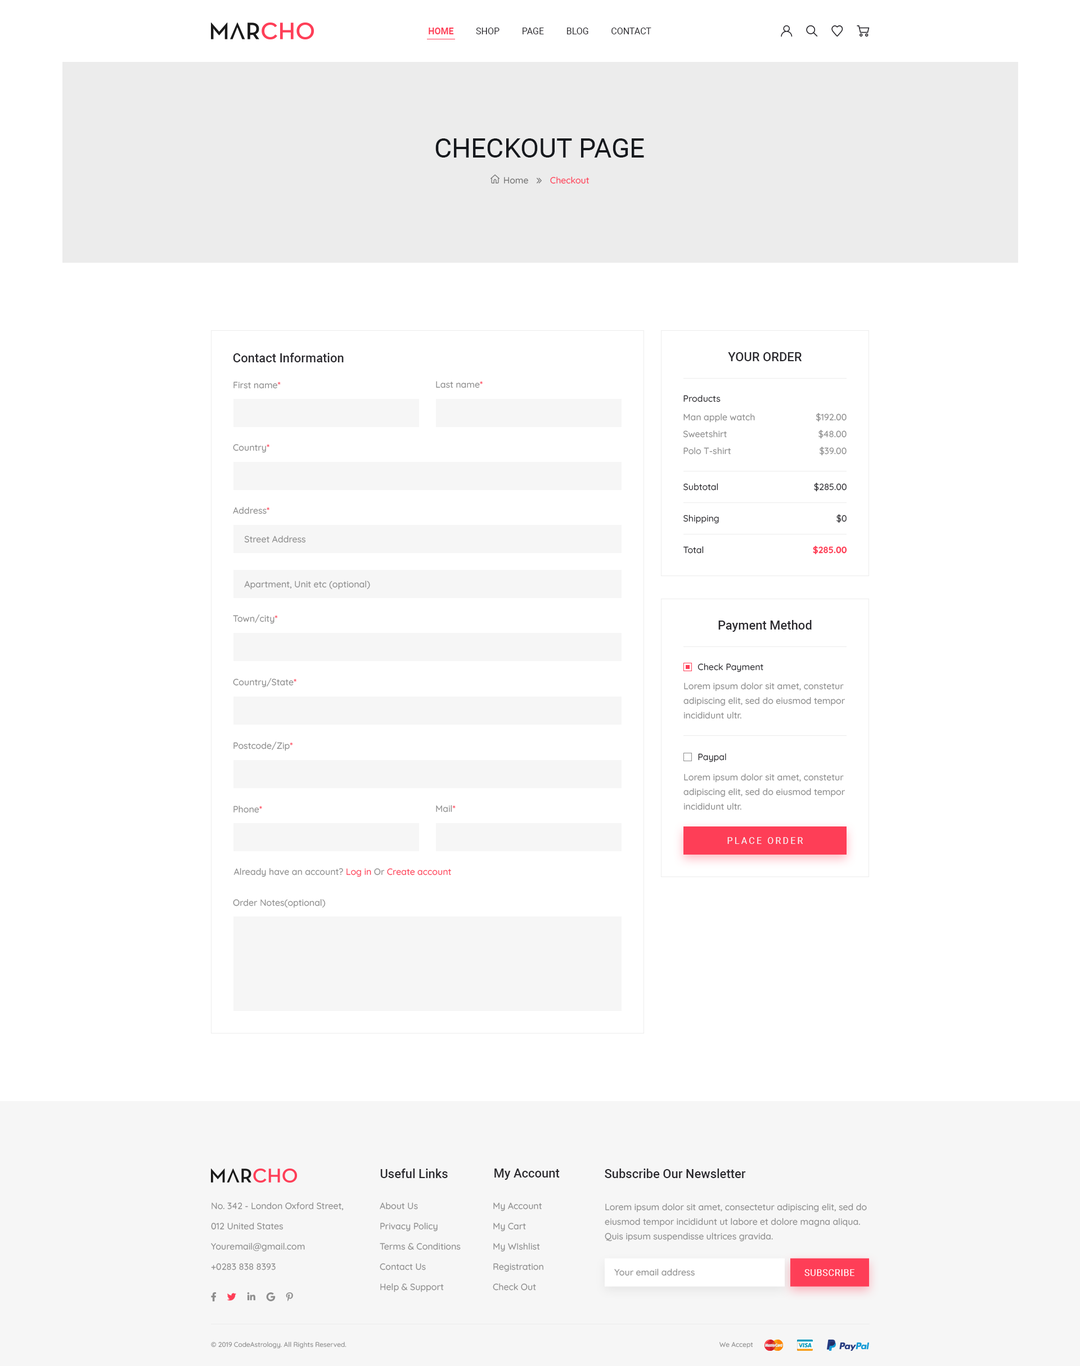
<style>
.page{position:relative;width:1080px;height:1366px;background:#ffffff}
.page>*{position:absolute;margin:0}
.t1{font:9px "Roboto-Regular";color:#29282d}
.t2{font:9px "Roboto-Bold";color:#fe3e57}
.t3{font:27px "Roboto-Regular";color:#15181d}
.t4{font:9px "Quicksand-Medium";color:#727272}
.t5{font:9px "Quicksand-Medium";color:#fe3e57}
.t6{font:12.4px "Roboto-Medium";color:#29282d}
.t7{font:12.4px "Roboto-Medium";color:#29282d;text-transform:uppercase}
.t8{font:9px "Quicksand-Medium";color:#8d8d8d}
.t9{font:9px "Quicksand-Medium";color:#29282d}
.t10{font:9px/16.9px "Quicksand-Medium";color:#8d8d8d}
.t11{font:9px "Quicksand-Bold";color:#fe3e57}
.t12{font:9px/14.6px "Quicksand-Medium";color:#8d8d8d}
.t13{font:9px "Roboto-Regular";letter-spacing:0.2em;color:#f5f6f8}
.t14{font:9px/20.2px "Quicksand-Medium";color:#8d8d8d}
.t15{font:9px "Roboto-Regular";letter-spacing:0.05em;color:#ffffff;text-transform:uppercase}
.t16{font:6.8px "Quicksand-Medium";color:#8d8d8d}
</style>
<div class="page">
<p class="t1" style="left:429px;top:28px;width:222px;height:6px"><span class="t2">HOME          </span>SHOP          PAGE          BLOG          CONTACT</p>
<p class="t3" style="left:435px;top:138px;width:209px;height:20px">CHECKOUT PAGE</p>
<p class="t4" style="left:504px;top:177px;width:24px;height:7px">Home</p>
<p class="t5" style="left:550px;top:177px;width:40px;height:7px">Checkout</p>
<p class="t6" style="left:233px;top:353px;width:111px;height:9px">Contact Information</p>
<p class="t7" style="left:728px;top:352px;width:74px;height:9px">Your Order</p>
<p class="t8" style="left:233px;top:381px;width:48px;height:8px">First name<span class="t5">*</span></p>
<p class="t8" style="left:436px;top:381px;width:47px;height:7px">Last name<span class="t5">*</span></p>
<p class="t9" style="left:683px;top:395px;width:38px;height:7px">Products</p>
<p class="t10" style="left:683px;top:413px;width:72px;height:41px">Man apple watch<br>Sweetshirt<br>Polo T-shirt</p>
<p class="t10" style="left:816px;top:413px;width:31px;height:43px;text-align:right">$192.00<br>$48.00<br>$39.00</p>
<p class="t8" style="left:233px;top:444px;width:36px;height:9px">Country<span class="t5">*</span></p>
<p class="t9" style="left:683px;top:483px;width:35px;height:7px">Subtotal</p>
<p class="t9" style="left:814px;top:482px;width:33px;height:10px">$285.00</p>
<p class="t8" style="left:233px;top:507px;width:36px;height:7px">Address<span class="t5">*</span></p>
<p class="t9" style="left:683px;top:515px;width:36px;height:9px">Shipping</p>
<p class="t9" style="left:836px;top:514px;width:11px;height:9px">$0</p>
<p class="t8" style="left:244px;top:536px;width:62px;height:7px">Street Address</p>
<p class="t11" style="left:813px;top:546px;width:34px;height:9px">$285.00</p>
<p class="t9" style="left:683px;top:546px;width:21px;height:8px">Total</p>
<p class="t8" style="left:244px;top:580px;width:126px;height:10px">Apartment, Unit etc (optional)</p>
<p class="t8" style="left:233px;top:614px;width:45px;height:10px">Town/city<span class="t5">*</span></p>
<p class="t6" style="left:718px;top:620px;width:94px;height:12px">Payment Method</p>
<p class="t9" style="left:698px;top:663px;width:65px;height:9px">Check Payment</p>
<p class="t8" style="left:233px;top:678px;width:63px;height:9px">Country/State<span class="t5">*</span></p>
<p class="t12" style="left:683px;top:682px;width:162px;height:37px">Lorem ipsum dolor sit amet, constetur adipiscing elit, sed do eiusmod tempor incididunt ultr.</p>
<p class="t8" style="left:233px;top:741px;width:60px;height:10px">Postcode/Zip<span class="t5">*</span></p>
<p class="t9" style="left:698px;top:753px;width:28px;height:9px">Paypal</p>
<p class="t12" style="left:683px;top:773px;width:162px;height:37px">Lorem ipsum dolor sit amet, constetur adipiscing elit, sed do eiusmod tempor incididunt ultr.</p>
<p class="t8" style="left:233px;top:806px;width:29px;height:7px">Phone<span class="t5">*</span></p>
<p class="t8" style="left:436px;top:805px;width:20px;height:7px">Mail<span class="t5">*</span></p>
<p class="t13" style="left:727px;top:837px;width:76px;height:7px">PLACE ORDER</p>
<p class="t8" style="left:233px;top:868px;width:218px;height:9px">Already have an account? <span class="t5">Log in </span>Or<span class="t5"> Create account</span></p>
<p class="t8" style="left:233px;top:899px;width:93px;height:9px">Order Notes(optional)</p>
<p class="t6" style="left:380px;top:1168px;width:68px;height:10px">Useful Links</p>
<p class="t6" style="left:494px;top:1168px;width:66px;height:12px">My Account</p>
<p class="t6" style="left:605px;top:1168px;width:141px;height:10px">Subscribe Our Newsletter</p>
<p class="t14" style="left:211px;top:1202px;width:133px;height:68px">No. 342 - London Oxford Street,<br>012 United States<br>Youremail@gmail.com<br>+0283 838 8393</p>
<p class="t14" style="left:380px;top:1202px;width:81px;height:90px">About Us<br>Privacy Policy<br>Terms &amp; Conditions<br>Contact Us<br>Help &amp; Support</p>
<p class="t14" style="left:493px;top:1202px;width:50px;height:88px">My Account<br>My Cart<br>My WIshlist<br>Registration<br>Check Out</p>
<p class="t12" style="left:605px;top:1203px;width:262px;height:38px">Lorem ipsum dolor sit amet, consectetur adipiscing elit, sed do eiusmod tempor incididunt ut labore et dolore magna aliqua. Quis ipsum suspendisse ultrices gravida.</p>
<p class="t8" style="left:614px;top:1268px;width:81px;height:8px">Your email address</p>
<p class="t15" style="left:804px;top:1269px;width:50px;height:7px">Subscribe</p>
<p class="t16" style="left:211px;top:1342px;width:135px;height:6px">© 2019 CodeAstrology. All Rights Reserved.</p>
<p class="t16" style="left:719px;top:1342px;width:34px;height:6px">We Accept</p>
</div>
